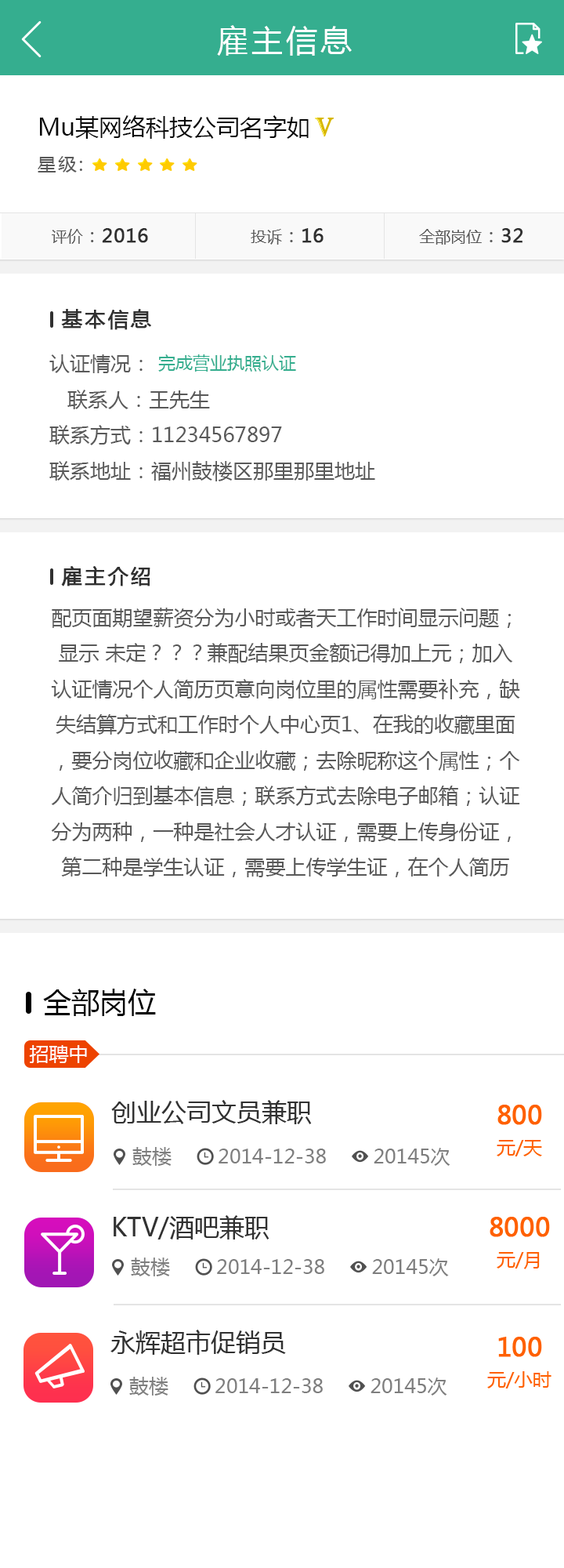
<style>
.page{position:relative;width:564px;height:1568px;background:#ffffff}
.page>*{position:absolute;margin:0}
.t1{font:31.4px "MicrosoftYaHei";letter-spacing:0.1em;color:#ffffff}
.t2{font:23.5px "MicrosoftYaHei";color:#080808}
.t3{font:18.8px "MicrosoftYaHei";letter-spacing:0.1em;color:#595959}
.t4{font:18.8px "MicrosoftYaHei";color:#303030;font-weight:bold}
.t5{font:15.7px "MicrosoftYaHei";color:#595959}
.t6{font:18.8px "MicrosoftYaHei";color:#595959}
.t7{font:20.4px "MicrosoftYaHei";letter-spacing:0.1em;color:#303030;font-weight:bold}
.t8{font:20.4px "MicrosoftYaHei";color:#595959}
.t9{font:17.2px "MicrosoftYaHei";color:#35ae8f}
.t10{font:28.2px "MicrosoftYaHei";color:#000000}
.t11{font:19.6px "MicrosoftYaHei";color:#ffffff}
</style>
<div class="page">
<p class="t1" style="left:217px;top:25px;width:135px;height:31px">雇主信息</p>
<p class="t2" style="left:40px;top:115px;width:269px;height:24px">Mu某网络科技公司名字如</p>
<p class="t3" style="left:38px;top:156px;width:44px;height:16px">星级:</p>
<p class="t4" style="left:52px;top:228px;width:96px;height:16px"><span class="t5">评价</span><span class="t6">：</span>2016</p>
<p class="t5" style="left:251px;top:228px;width:73px;height:17px">投诉<span class="t6">：</span><span class="t4">16</span></p>
<p class="t5" style="left:419px;top:228px;width:105px;height:17px">全部岗位<span class="t6">：</span><span class="t4">32</span></p>
<p class="t7" style="left:61px;top:309px;width:90px;height:21px">基本信息</p>
<p class="t8" style="left:49px;top:354px;width:327px;height:127px">认证情况：<br>   联系人：王先生<br>联系方式：11234567897<br>联系地址：福州鼓楼区那里那里地址</p>
<p class="t9" style="left:158px;top:354px;width:138px;height:18px">完成营业执照认证</p>
<p class="t7" style="left:61px;top:566px;width:90px;height:20px">雇主介绍</p>
<p class="t8" style="left:51px;top:608px;width:470px;height:269px;text-align:center">配页面期望薪资分为小时或者天工作时间显示问题；显示 未定？？？兼配结果页金额记得加上元；加入认证情况个人简历页意向岗位里的属性需要补充，缺失结算方式和工作时个人中心页1、在我的收藏里面，要分岗位收藏和企业收藏；去除昵称这个属性；个人简介归到基本信息；联系方式去除电子邮箱；认证分为两种，一种是社会人才认证，需要上传身份证，第二种是学生认证，需要上传学生证，在个人简历</p>
<p class="t10" style="left:43px;top:989px;width:113px;height:27px">全部岗位</p>
<p class="t11" style="left:29px;top:1045px;width:58px;height:18px">招聘中</p>
</div>
